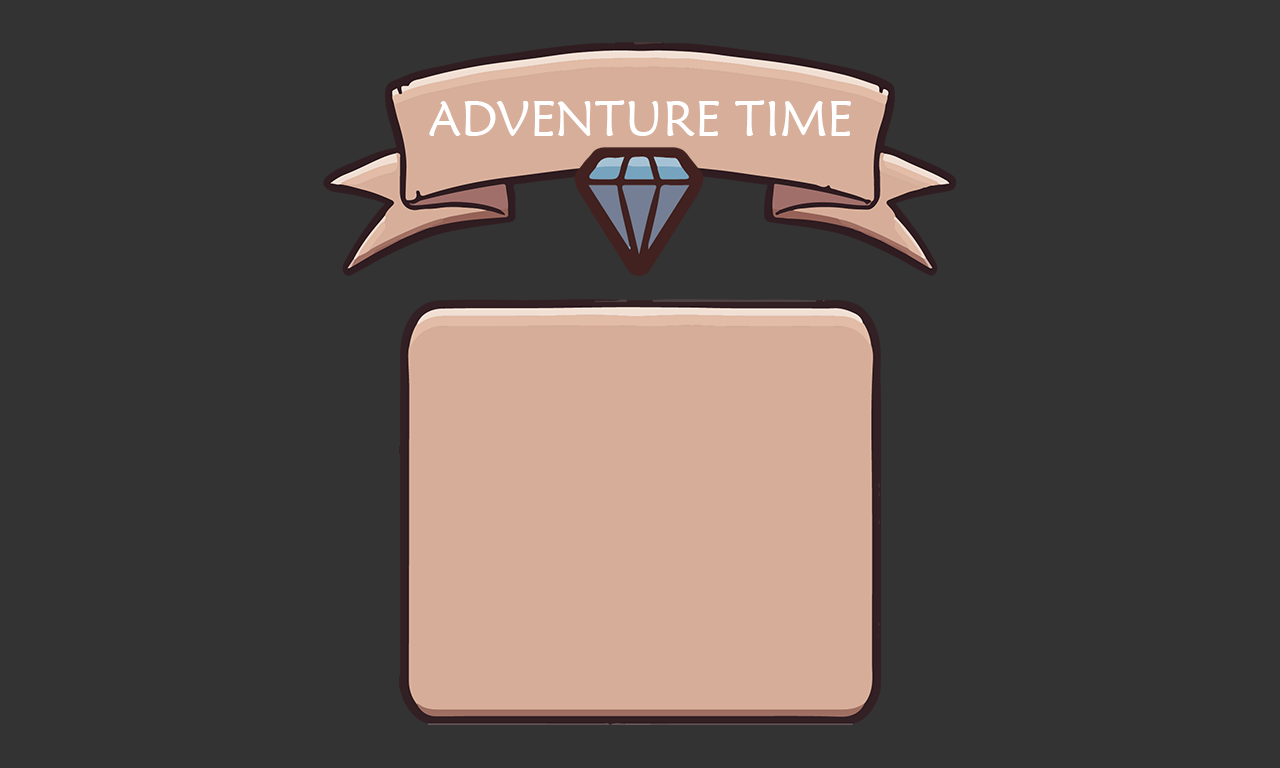
<style>
.page{position:relative;width:1280px;height:768px;background:#333333}
.page>*{position:absolute;margin:0}
.t1{font:50px "MaiandraGD-Regular";color:#ffffff}
</style>
<div class="page">
<p class="t1" style="left:429px;top:100px;width:422px;height:37px">ADVENTURE TIME</p>
</div>
